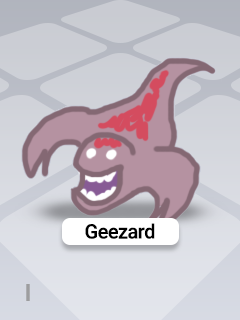
<style>
.page{position:relative;width:240px;height:320px}
.page>*{position:absolute;margin:0}
.t1{font:20px "Roboto-Medium";letter-spacing:-0.025em;color:#000000}
.t2{font:23.9px "Roboto-Bold";letter-spacing:-0.025em;color:#9d9d9f}
</style>
<div class="page">
<p class="t1" style="left:85px;top:223px;width:70px;height:16px">Geezard</p>
<p class="t2" style="left:26px;top:284px;width:4px;height:17px">I</p>
</div>
